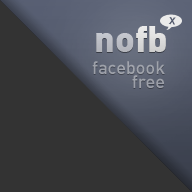
<style>
.page{position:relative;width:192px;height:192px;background:#333333}
.page>*{position:absolute;margin:0}
.t1{font:14px "FFDINMedium";color:#535a6d}
.t2{font:36px "FFDINBlackAlternate"}
.t3{font:18px/14px "FFDINMedium";color:#9ea2aa}
</style>
<div class="page">
<p class="t1" style="left:168px;top:17px;width:8px;height:8px;rotate:5deg">x</p>
<p class="t2" style="left:96px;top:26px;width:70px;height:26px">nofb</p>
<p class="t3" style="left:92px;top:61px;width:73px;height:27px;text-align:right">facebook<br>free</p>
</div>
